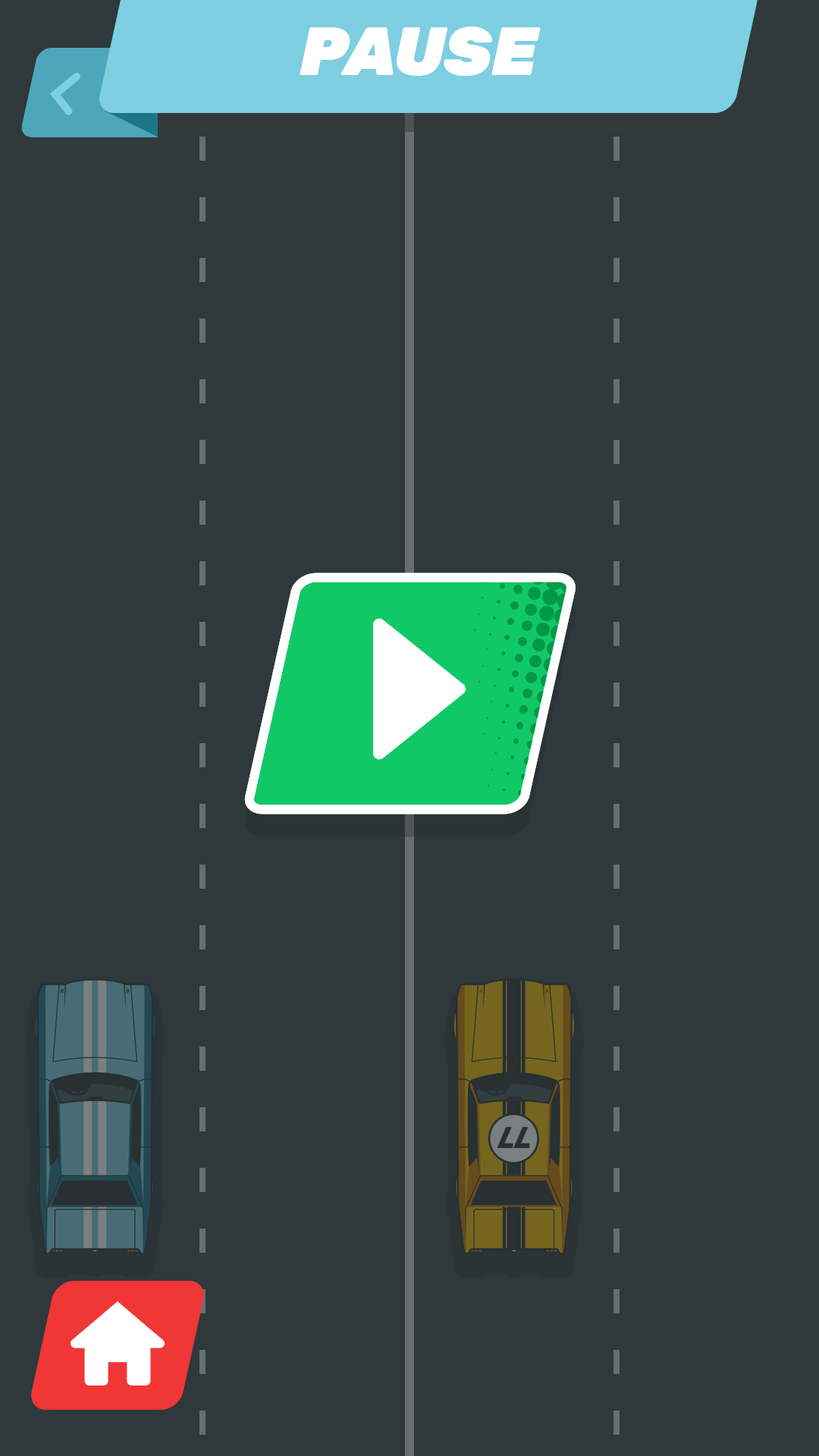
<style>
.page{position:relative;width:819px;height:1456px;background:#2f383a}
.page>*{position:absolute;margin:0}
.t1{font:68.2px "Rubik-BlackItalic";color:#ffffff;text-transform:uppercase}
</style>
<div class="page">
<p class="t1" style="left:300px;top:27px;width:241px;height:49px">pause</p>
</div>
